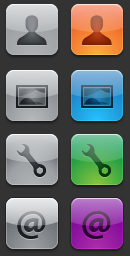
<style>
.page{position:relative;width:130px;height:256px;background:#333333}
.page>*{position:absolute;margin:0}
.t1{font:40px "MyriadPro-BlackSemiExt"}
</style>
<div class="page">
<p class="t1" style="left:82px;top:211px;width:29px;height:28px">@</p>
</div>
